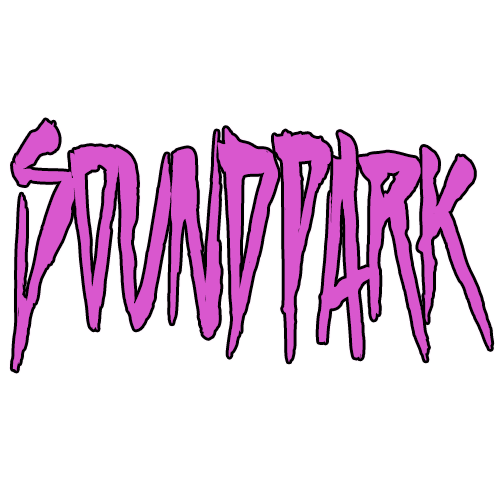
<style>
.page{position:relative;width:500px;height:500px;background:#ffffff}
.page>*{position:absolute;margin:0}
.t1{font:289.7px "GoingUnderRegular";color:#d957ce;scale:0.54 1}
</style>
<div class="page">
<p class="t1" style="left:12px;top:120px;width:480px;height:251px">SoundPark</p>
</div>
